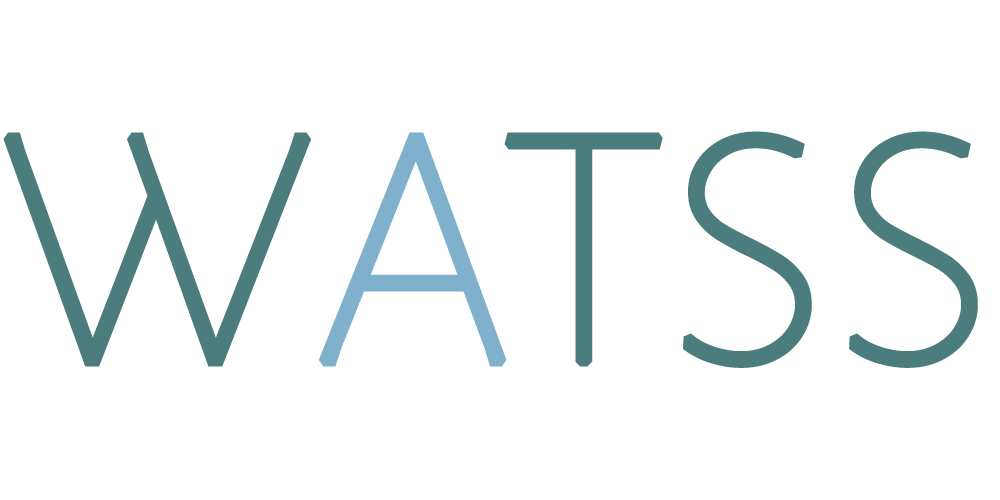
<style>
.page{position:relative;width:1000px;height:500px;background:#ffffff}
.page>*{position:absolute;margin:0}
.t1{font:351.9px "AlegreyaSansSC-Thin";color:#4c7d7e;font-weight:bold}
.t2{font:351.9px "AlegreyaSansSC-Thin";color:#80b1cc;font-weight:bold}
</style>
<div class="page">
<p class="t1" style="left:3px;top:131px;width:975px;height:237px">W<span class="t2">A</span>TSS</p>
</div>
